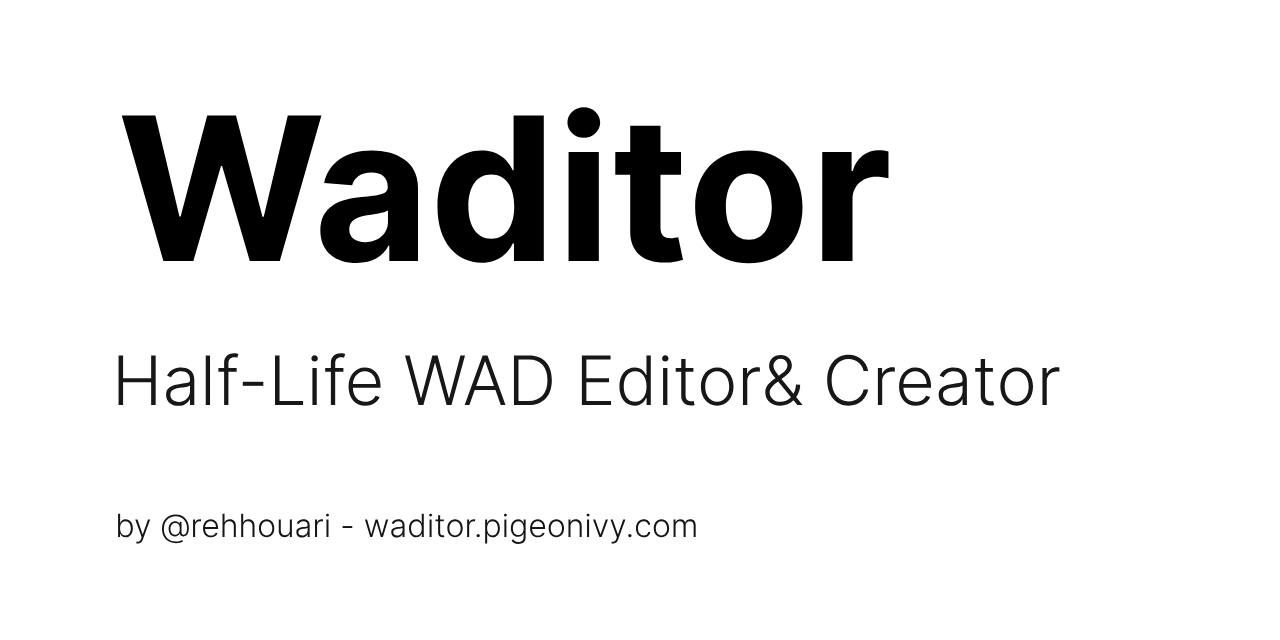
<style>
.page{position:relative;width:1280px;height:640px;background:#ffffff}
.page>*{position:absolute;margin:0}
.t1{font:200px "Inter-Bold";color:#000000}
.t2{font:68px "Inter-Light";color:#171717}
.t3{font:32px "Inter-Light";color:#151515}
</style>
<div class="page">
<p class="t1" style="left:121px;top:107px;width:768px;height:157px">Waditor</p>
<p class="t2" style="left:118px;top:353px;width:942px;height:53px">Half-Life WAD Editor&amp; Creator</p>
<p class="t3" style="left:118px;top:513px;width:578px;height:31px">by @rehhouari - waditor.pigeonivy.com</p>
</div>
